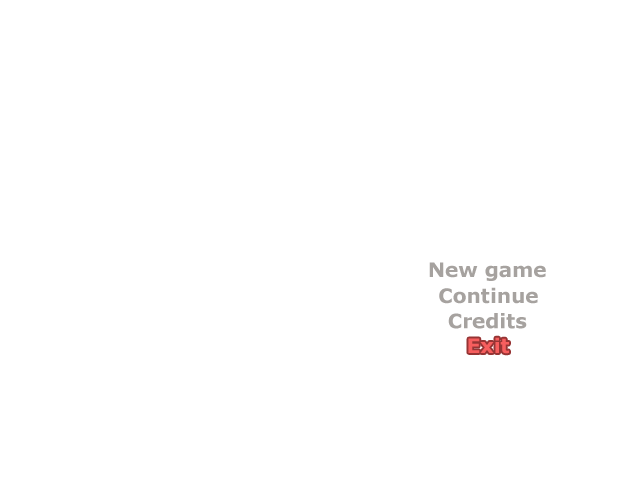
<style>
.page{position:relative;width:640px;height:480px;background:#ffffff}
.page>*{position:absolute;margin:0}
.t1{font:20px "Verdana-Bold";color:#a6a29f}
.t2{font:20px "Verdana-Bold";color:#f75e5e}
</style>
<div class="page">
<p class="t1" style="left:429px;top:262px;width:117px;height:19px">New game</p>
<p class="t1" style="left:439px;top:287px;width:99px;height:17px">Continue</p>
<p class="t1" style="left:448px;top:313px;width:79px;height:16px">Credits</p>
<p class="t2" style="left:468px;top:337px;width:41px;height:17px">Exit</p>
</div>
